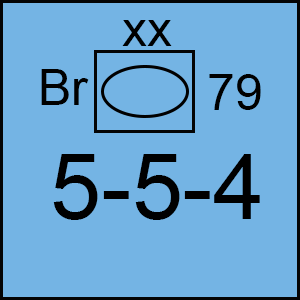
<style>
.page{position:relative;width:300px;height:300px;background:#74b4e4}
.page>*{position:absolute;margin:0}
.t1{font:50px "ArialMT";color:#000000}
.t2{font:91.7px "ArialMT";color:#000000}
</style>
<div class="page">
<p class="t1" style="left:122px;top:20px;width:50px;height:26px">xx</p>
<p class="t1" style="left:41px;top:69px;width:48px;height:36px">Br</p>
<p class="t1" style="left:209px;top:74px;width:52px;height:36px">79</p>
<p class="t2" style="left:53px;top:154px;width:207px;height:66px">5-5-4</p>
</div>
